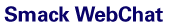
<style>
.page{position:relative;width:175px;height:28px;background:#ffffff}
.page>*{position:absolute;margin:0}
.t1{font:21px "Univers-Bold";letter-spacing:-0.02em;color:#090269}
</style>
<div class="page">
<p class="t1" style="left:4px;top:6px;width:159px;height:16px">Smack WebChat</p>
</div>
